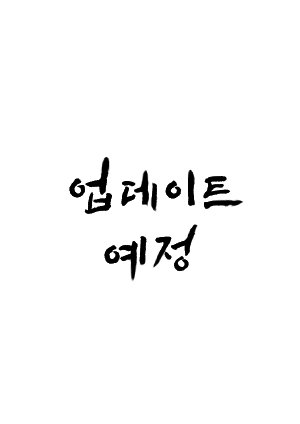
<style>
.page{position:relative;width:300px;height:424px;background:#ffffff}
.page>*{position:absolute;margin:0}
.t1{font:49px "SangSangRock";letter-spacing:0.16em;color:#000000}
</style>
<div class="page">
<p class="t1" style="left:69px;top:171px;width:161px;height:100px;text-align:center">업데이트<br>예정</p>
</div>
